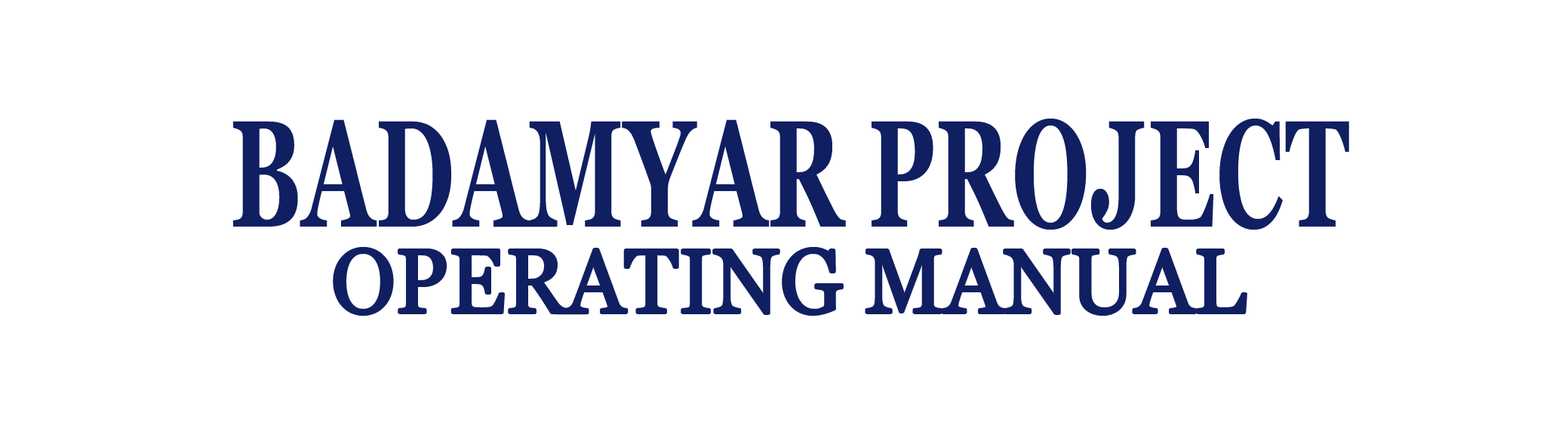
<style>
.page{position:relative;width:1568px;height:426px;background:#ffffff}
.page>*{position:absolute;margin:0}
.t1{font:150.9px "Georgia-Bold";letter-spacing:0.01em;color:#101f61;scale:0.63 1}
.t2{font:90.5px "Georgia";letter-spacing:0.01em;color:#101f61;scale:0.95 1}
</style>
<div class="page">
<p class="t1" style="left:233px;top:118px;width:1116px;height:111px">BADAMYAR PROJECT</p>
<p class="t2" style="left:334px;top:248px;width:912px;height:66px">OPERATING MANUAL</p>
</div>
